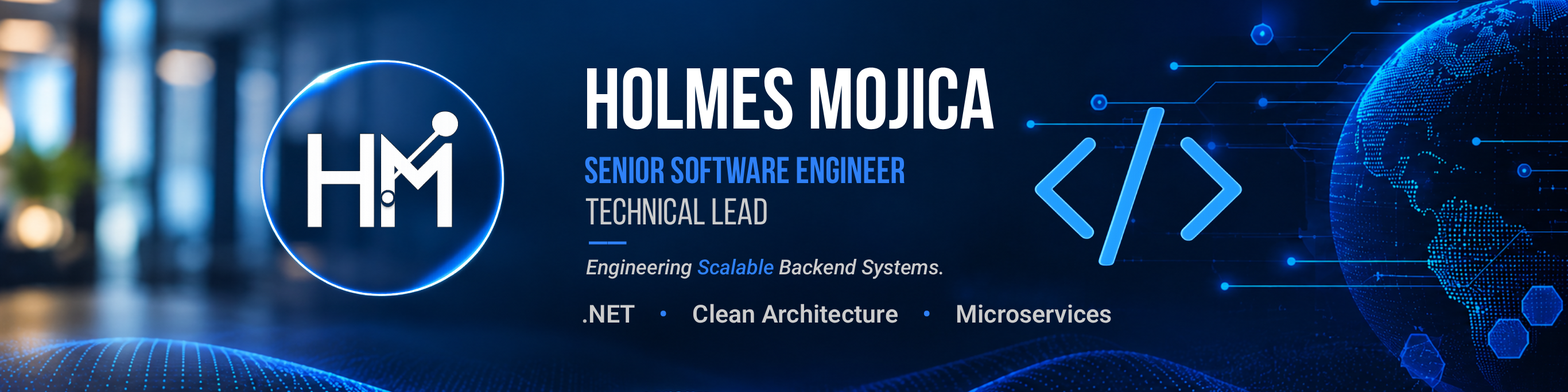
<style>
.page{position:relative;width:1568px;height:392px}
.page>*{position:absolute;margin:0}
.t1{font:86.1px "BebasNeueBold";color:#ffffff}
.t2{font:37.3px "BebasNeueBold";color:#2f81f7}
.t3{font:37.3px "BebasNeueRegular";color:#cccccc}
.t4{font:20.7px "Roboto-MediumItalic";color:#cccccc}
.t5{font:20.7px "Roboto-MediumItalic";color:#2f81f7}
.t6{font:24.7px "Roboto-SemiBold";color:#cccccc}
.t7{font:24.7px "Roboto-SemiBold";color:#bbbbbb}
.t8{font:24.7px "Roboto-SemiBold";color:#2f81f7}
</style>
<div class="page">
<p class="t1" style="left:587px;top:67px;width:407px;height:63px">HOLMES MOJICA</p>
<p class="t2" style="left:585px;top:156px;width:320px;height:28px">SENIOR SOFTWARE ENGINEER</p>
<p class="t3" style="left:585px;top:198px;width:182px;height:27px">TECHNICAL LEAD</p>
<p class="t2" style="left:589px;top:241px;width:38px;height:3px">__</p>
<p class="t4" style="left:586px;top:258px;width:356px;height:21px">Engineering <span class="t5">Scalable </span>Backend Systems.</p>
<p class="t6" style="left:583px;top:304px;width:528px;height:19px"><span class="t7">.</span>NET    <span class="t8">•    </span>Clean Architecture    <span class="t8">•    </span>Microservices</p>
</div>
